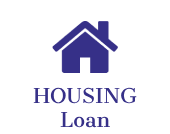
<style>
.page{position:relative;width:170px;height:134px;background:#ffffff}
.page>*{position:absolute;margin:0}
.t1{font:20px "CantataOne-Regular";color:#363088}
</style>
<div class="page">
<p class="t1" style="left:33px;top:87px;width:104px;height:41px;text-align:center">HOUSING<br>Loan</p>
</div>
